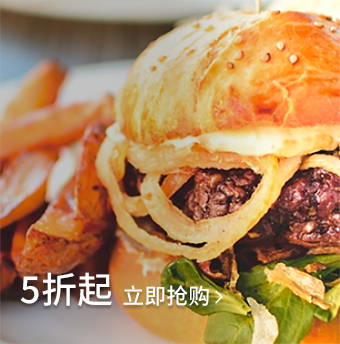
<style>
.page{position:relative;width:340px;height:344px}
.page>*{position:absolute;margin:0}
.t1{font:36px "SourceHanSansCN-Medium";color:#ffffff}
.t2{font:22px "SourceHanSansCN-Medium";color:#ffffff}
</style>
<div class="page">
<p class="t1" style="left:20px;top:272px;width:92px;height:35px">5折起</p>
<p class="t2" style="left:123px;top:285px;width:86px;height:21px">立即抢购</p>
</div>
